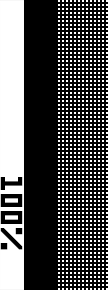
<style>
.page{position:relative;width:108px;height:290px;background:#000000}
.page>*{position:absolute;margin:0}
.t1{font:41.2px "FORCED-SQUARE";color:#000000}
</style>
<div class="page">
<p class="t1" style="left:0px;top:177px;width:23px;height:73px;rotate:90deg">100%</p>
</div>
